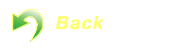
<style>
.page{position:relative;width:190px;height:48px;background:#ffffff}
.page>*{position:absolute;margin:0}
.t1{font:18px "HelveticaNeue-BoldItalic";letter-spacing:0.075em;color:#fdff6f}
</style>
<div class="page">
<p class="t1" style="left:55px;top:16px;width:49px;height:14px">Back</p>
</div>
